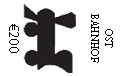
<style>
.page{position:relative;width:124px;height:76px;background:#ffffff}
.page>*{position:absolute;margin:0}
.t1{font:12px "AdobeDevanagari-Regular";color:#000000;scale:0.9 1}
.t2{font:14px "MyriadPro-Regular";color:#000000}
</style>
<div class="page">
<p class="t1" style="left:91px;top:14px;width:22px;height:49px;text-align:center;rotate:90deg">OST<br>BAHNHOF</p>
<p class="t2" style="left:9px;top:24px;width:10px;height:29px;rotate:90deg">€200</p>
</div>
